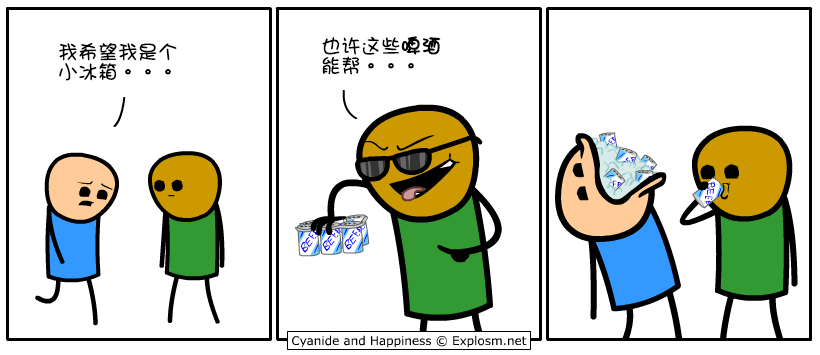
<style>
.page{position:relative;width:820px;height:355px;background:#ffffff}
.page>*{position:absolute;margin:0}
.t1{font:20px/20px "DFGirl";color:#000000}
.t2{font:20px/20px "DFGirl";color:#000000;font-weight:bold}
</style>
<div class="page">
<p class="t1" style="left:322px;top:36px;width:119px;height:39px">也许这些<span class="t2">啤酒<br></span>能帮。。。</p>
<p class="t1" style="left:58px;top:43px;width:119px;height:38px">我希望我是个<br>小冰箱。。。</p>
</div>
